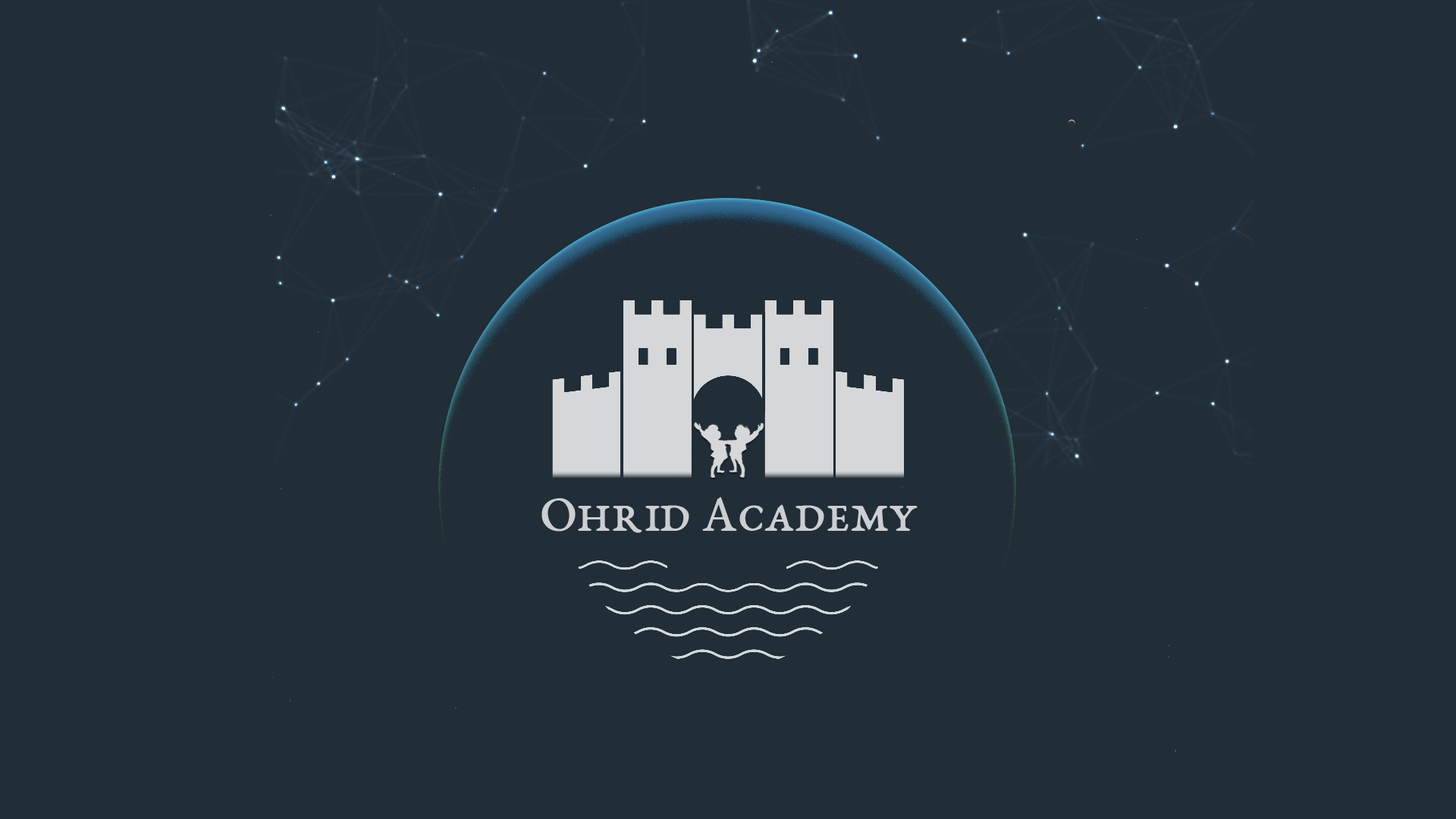
<style>
.page{position:relative;width:1456px;height:819px;background:#212d37}
.page>*{position:absolute;margin:0}
.t1{font:54.6px "EBGaramondSC08-Regular";color:#ccced1}
</style>
<div class="page">
<p class="t1" style="left:541px;top:497px;width:377px;height:36px">Ohrid Academy</p>
</div>
